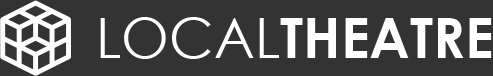
<style>
.page{position:relative;width:493px;height:76px;background:#333333}
.page>*{position:absolute;margin:0}
.t1{font:55px "CenturyGothic-Bold";color:#ffffff}
.t2{font:55px "CenturyGothic";color:#ffffff}
</style>
<div class="page">
<p class="t1" style="left:100px;top:17px;width:392px;height:42px"><span class="t2">LOCAL</span>THEATRE</p>
</div>
